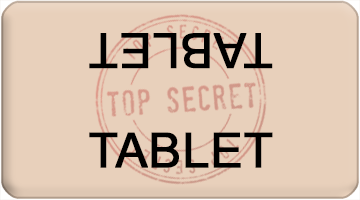
<style>
.page{position:relative;width:360px;height:200px;background:#e8d0bb}
.page>*{position:absolute;margin:0}
.t1{font:48px "ArialMT";color:#000000;font-weight:bold}
</style>
<div class="page">
<p class="t1" style="left:89px;top:33px;width:184px;height:36px;rotate:180deg">TABLET</p>
<p class="t1" style="left:89px;top:132px;width:184px;height:36px">TABLET</p>
</div>
